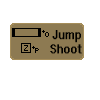
<style>
.page{position:relative;width:100px;height:100px;background:#ffffff}
.page>*{position:absolute;margin:0}
.t1{font:12px "System";letter-spacing:0.01em;color:#000000;font-weight:bold;scale:0.9 1}
</style>
<div class="page">
<p class="t1" style="left:50px;top:30px;width:32px;height:24px">Jump<br>     Shoot</p>
</div>
